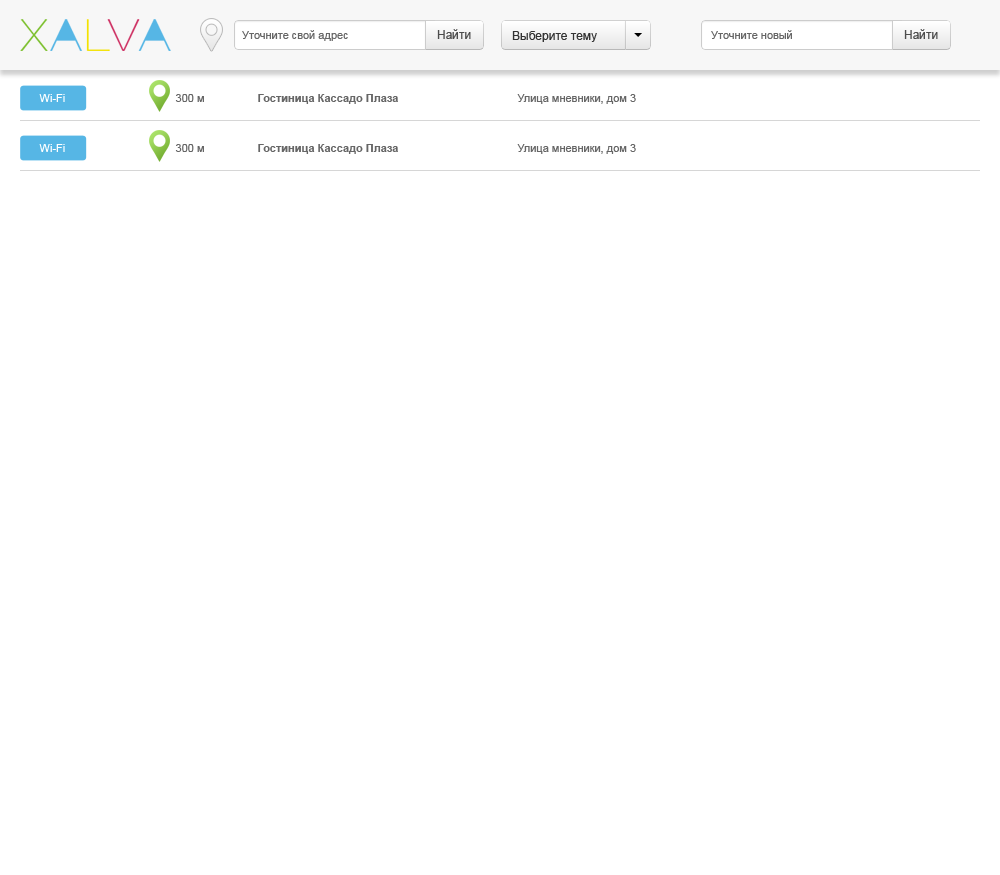
<style>
.page{position:relative;width:1000px;height:875px;background:#ffffff}
.page>*{position:absolute;margin:0}
.t1{font:11px "ArialMT";color:#666666}
.t2{font:12px "ArialMT";color:#4c4c4c}
.t3{font:12px "ArialMT";color:#333333}
.t4{font:11px "ArialMT";color:#ffffff}
.t5{font:11px "Arial-BoldMT";color:#666666}
</style>
<div class="page">
<p class="t1" style="left:242px;top:30px;width:106px;height:11px">Уточните свой адрес</p>
<p class="t2" style="left:437px;top:29px;width:34px;height:10px">Найти</p>
<p class="t1" style="left:711px;top:30px;width:81px;height:9px">Уточните новый</p>
<p class="t2" style="left:904px;top:29px;width:34px;height:10px">Найти</p>
<p class="t3" style="left:512px;top:31px;width:85px;height:11px">Выберите тему</p>
<p class="t4" style="left:39px;top:94px;width:26px;height:8px">Wi-Fi</p>
<p class="t1" style="left:175px;top:94px;width:29px;height:8px">300 м</p>
<p class="t5" style="left:258px;top:94px;width:140px;height:10px">Гостиница Кассадо Плаза</p>
<p class="t1" style="left:517px;top:94px;width:119px;height:10px">Улица мневники, дом 3</p>
<p class="t4" style="left:39px;top:144px;width:26px;height:8px">Wi-Fi</p>
<p class="t1" style="left:175px;top:144px;width:29px;height:8px">300 м</p>
<p class="t5" style="left:258px;top:144px;width:140px;height:10px">Гостиница Кассадо Плаза</p>
<p class="t1" style="left:517px;top:144px;width:119px;height:10px">Улица мневники, дом 3</p>
</div>
